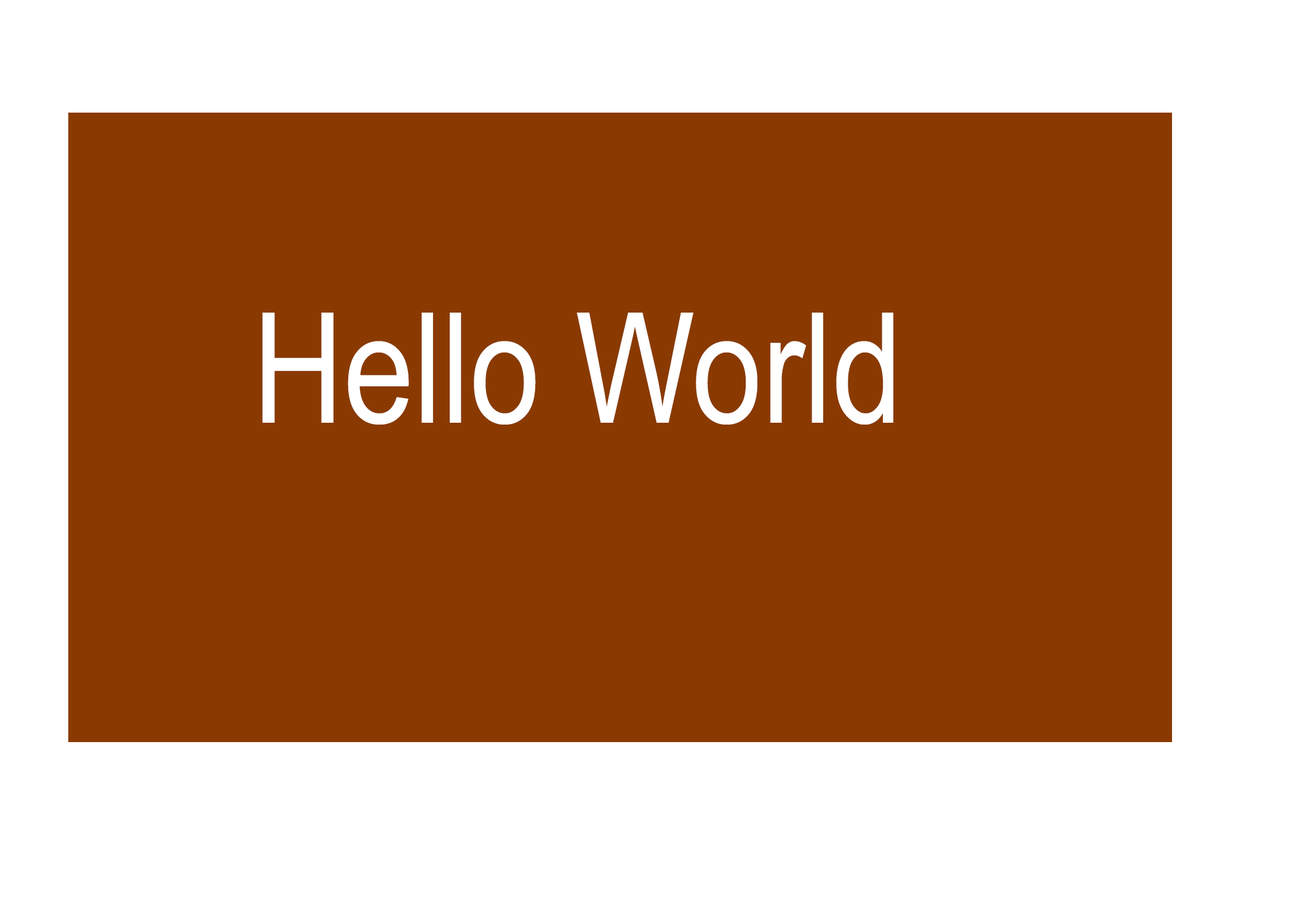
<style>
.page{position:relative;width:1292px;height:923px;background:#8a3a00}
.page>*{position:absolute;margin:0}
.t1{font:153.8px "ArialNarrow";color:#ffffff}
</style>
<div class="page">
<p class="t1" style="left:262px;top:313px;width:631px;height:112px">Hello World</p>
</div>
